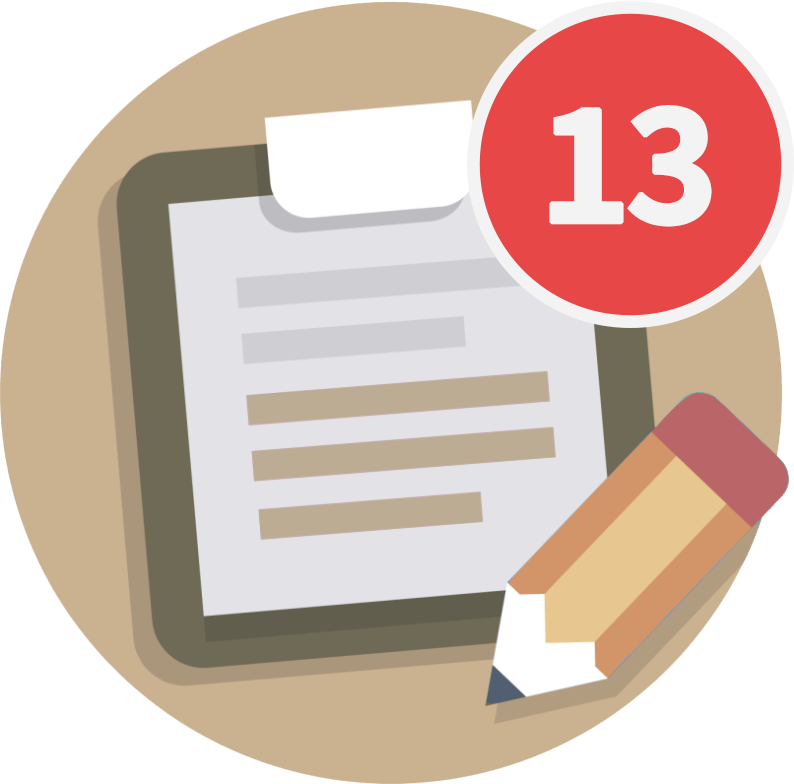
<style>
.page{position:relative;width:794px;height:784px;background:#ffffff}
.page>*{position:absolute;margin:0}
.t1{font:156px "NotoSansJP-Bold";letter-spacing:-0.06em;color:#f3f3f3;font-weight:bold}
</style>
<div class="page">
<p class="t1" style="left:549px;top:105px;width:163px;height:122px">13</p>
</div>
